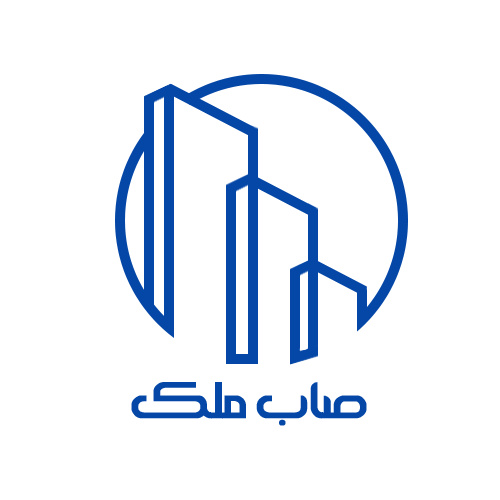
<style>
.page{position:relative;width:500px;height:500px;background:#ffffff}
.page>*{position:absolute;margin:0}
.t1{font:49.7px "ASardarHoor";color:#0547a7;font-weight:bold}
</style>
<div class="page">
<p class="t1" style="left:131px;top:382px;width:236px;height:44px">صاب ملک</p>
</div>
